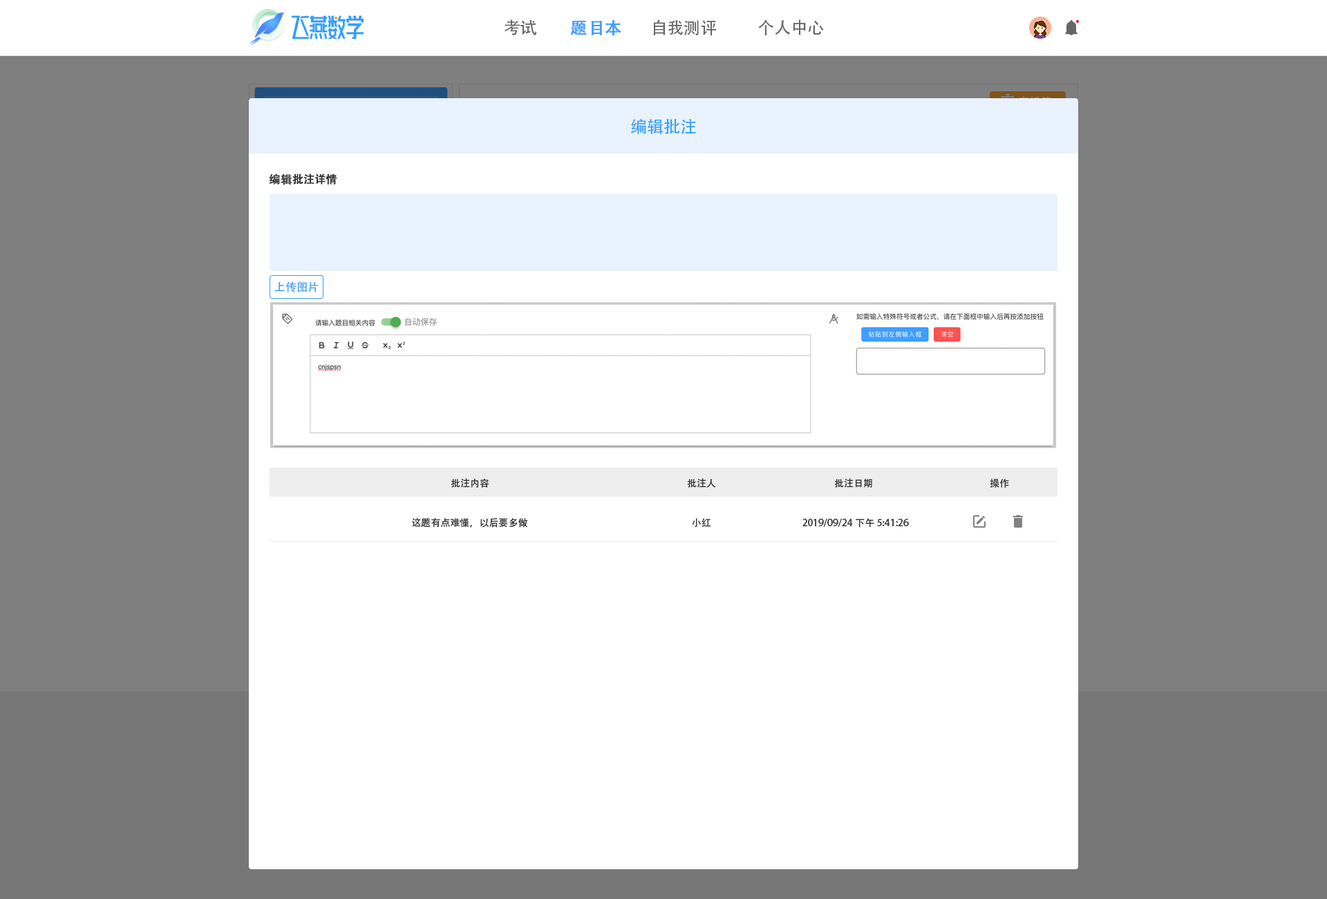
<style>
.page{position:relative;width:1327px;height:899px;background:#ffffff}
.page>*{position:absolute;margin:0}
.t1{font:16.6px "AdobeHeitiStd-Regular";color:#666666}
.t2{font:16.6px "AdobeHeitiStd-Regular";color:#409eff;font-weight:bold}
.t3{font:16.6px "AdobeHeitiStd-Regular";color:#339dff}
.t4{font:11.1px "AdobeHeitiStd-Regular";color:#333333;font-weight:bold}
.t5{font:11.1px "AdobeHeitiStd-Regular";color:#409eff}
.t6{font:9.7px "AdobeHeitiStd-Regular";color:#333333}
</style>
<div class="page">
<p class="t1" style="left:504px;top:19px;width:33px;height:16px">考试</p>
<p class="t2" style="left:570px;top:20px;width:51px;height:16px">题目本</p>
<p class="t1" style="left:653px;top:19px;width:63px;height:17px">自我测评</p>
<p class="t1" style="left:758px;top:19px;width:66px;height:16px">个人中心</p>
<p class="t3" style="left:631px;top:119px;width:65px;height:15px">编辑批注</p>
<p class="t4" style="left:269px;top:173px;width:68px;height:12px">编辑批注详情</p>
<p class="t5" style="left:274px;top:281px;width:44px;height:11px">上传图片</p>
<p class="t6" style="left:451px;top:478px;width:38px;height:10px">批注内容</p>
<p class="t6" style="left:687px;top:478px;width:29px;height:9px">批注人</p>
<p class="t6" style="left:834px;top:478px;width:38px;height:9px">批注日期</p>
<p class="t6" style="left:990px;top:478px;width:19px;height:10px">操作</p>
<p class="t6" style="left:412px;top:517px;width:115px;height:10px">这题有点难懂，以后要多做</p>
<p class="t6" style="left:692px;top:518px;width:19px;height:9px">小红</p>
<p class="t6" style="left:802px;top:518px;width:107px;height:9px">2019/09/24下午5:41:26</p>
</div>
